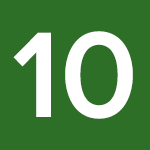
<style>
.page{position:relative;width:150px;height:150px;background:#2e6f27}
.page>*{position:absolute;margin:0}
.t1{font:126.3px "ProximaNova-Semibold";color:#ffffff}
</style>
<div class="page">
<p class="t1" style="left:13px;top:31px;width:120px;height:88px">10</p>
</div>
